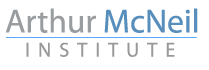
<style>
.page{position:relative;width:209px;height:70px;background:#ffffff}
.page>*{position:absolute;margin:0}
.t1{font:33.6px "MyriadPro-Regular";color:#9a9d9f}
.t2{font:33.6px "MyriadPro-Regular";color:#588ebc}
.t3{font:20.2px "MyriadPro-Regular";letter-spacing:0.4em;color:#999999}
</style>
<div class="page">
<p class="t1" style="left:5px;top:8px;width:91px;height:25px">Arthur</p>
<p class="t2" style="left:104px;top:8px;width:94px;height:25px">McNeil</p>
<p class="t3" style="left:26px;top:42px;width:149px;height:15px">INSTITUTE</p>
</div>
